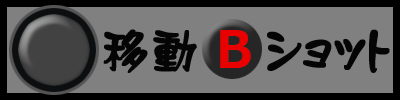
<style>
.page{position:relative;width:400px;height:100px;background:#808080}
.page>*{position:absolute;margin:0}
.t1{font:48px "DFRuLei-W7-WING-RKSJ-H";color:#050505;font-weight:bold}
</style>
<div class="page">
<p class="t1" style="left:103px;top:29px;width:94px;height:44px">移動</p>
<p class="t1" style="left:267px;top:29px;width:123px;height:44px">ショット</p>
</div>
